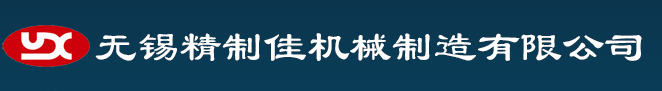
<style>
.page{position:relative;width:662px;height:91px}
.page>*{position:absolute;margin:0}
.t1{font:43.3px "LiSu";letter-spacing:-0.01em;color:#ffffff}
</style>
<div class="page">
<p class="t1" style="left:95px;top:33px;width:547px;height:28px">无锡精制佳机械制造有限公司</p>
</div>
